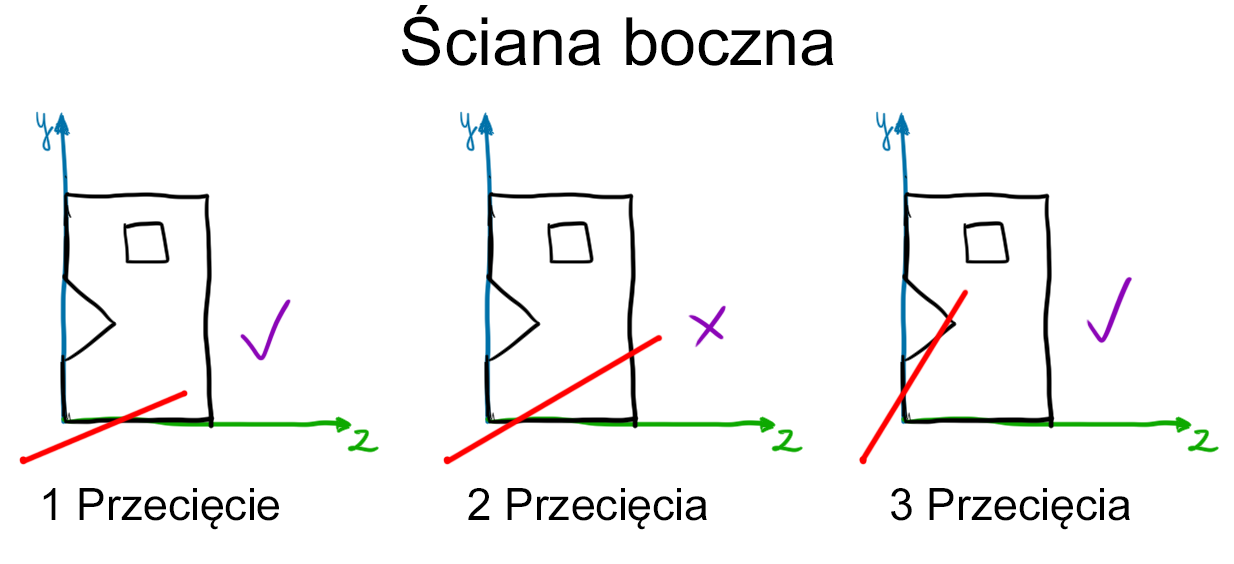
<style>
.page{position:relative;width:1234px;height:564px;background:#ffffff}
.page>*{position:absolute;margin:0}
.t1{font:66.7px "ArialMT";color:#000000}
.t2{font:44.4px "ArialMT";color:#000000}
</style>
<div class="page">
<p class="t1" style="left:402px;top:5px;width:432px;height:61px">Ściana boczna</p>
<p class="t2" style="left:43px;top:488px;width:236px;height:42px">1 Przecięcie</p>
<p class="t2" style="left:468px;top:488px;width:239px;height:42px">2 Przecięcia</p>
<p class="t2" style="left:891px;top:488px;width:239px;height:42px">3 Przecięcia</p>
</div>
